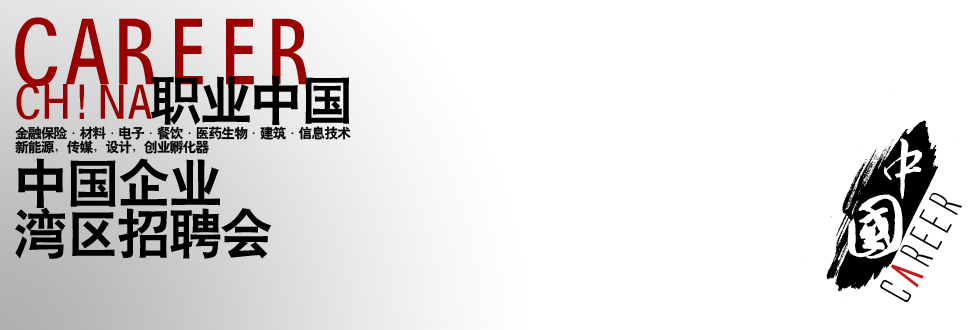
<style>
.page{position:relative;width:980px;height:330px;background:#ffffff}
.page>*{position:absolute;margin:0}
.t1{font:101.8px "-G-h-e-i-0-1-h";color:#990000}
.t2{font:51.5px "-G-h-e-i-0-1-h";color:#000000}
.t3{font:53.2px "-G-h-e-i-0-1-h";color:#990000;scale:1.06 1}
.t4{font:12.9px/14.3px "-G-h-e-i-0-1-h";color:#000000}
.t5{font:85.8px "fwangxing";color:#ffffff}
.t6{font:85.8px "Fzicao";color:#ffffff}
.t7{font:42.9px "AlienLeague";color:#000000}
.t8{font:42.9px "AlienLeague";color:#c51a1a;font-weight:bold}
</style>
<div class="page">
<p class="t1" style="left:15px;top:17px;width:293px;height:69px">CAREER</p>
<p class="t2" style="left:151px;top:75px;width:198px;height:50px">职业中国</p>
<p class="t3" style="left:16px;top:83px;width:136px;height:37px">CH!NA</p>
<p class="t4" style="left:15px;top:126px;width:336px;height:28px">金融保险·材料·电子·餐饮·医药生物·建筑·信息技术<br>新能源，传媒，设计，创业孵化器</p>
<p class="t5" style="left:884px;top:138px;width:38px;height:61px">中</p>
<p class="t2" style="left:18px;top:158px;width:202px;height:50px">中国企业</p>
<p class="t6" style="left:847px;top:194px;width:56px;height:65px">国</p>
<p class="t7" style="left:880px;top:192px;width:82px;height:111px;rotate:-61deg">C<span class="t8">a</span>reer</p>
<p class="t2" style="left:15px;top:207px;width:257px;height:52px">湾区招聘会</p>
</div>
